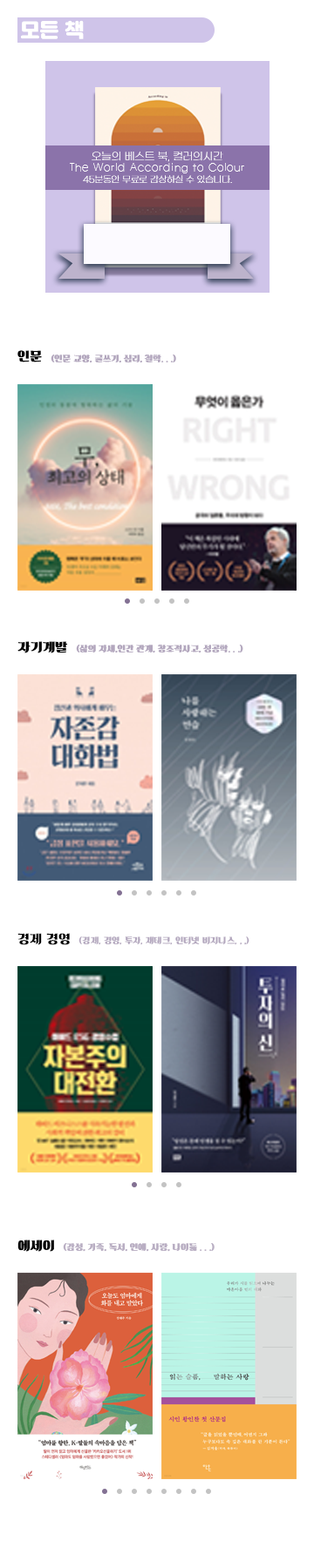
<style>
.page{position:relative;width:314px;height:1568px;background:#ffffff}
.page>*{position:absolute;margin:0}
.t1{font:19.3px "JalnanOTF";color:#ffffff}
.t2{font:10.5px "GmarketSansLight";color:#ffffff}
.t3{font:12.2px "HYnamL";color:#ffffff}
.t4{font:8.7px "GmarketSansLight";color:#ffffff}
.t5{font:13.1px "HULifestyle180";color:#000000}
.t6{font:8.7px "HULifestyle180";color:#b3a7be}
.t7{font:8.7px "HULifestyle180";color:#b9aec3}
</style>
<div class="page">
<p class="t1" style="left:21px;top:20px;width:63px;height:19px">모든 책</p>
<p class="t2" style="left:91px;top:152px;width:132px;height:10px">오늘의 베스트 북, 컬러의시간</p>
<p class="t3" style="left:70px;top:163px;width:174px;height:10px">The World According to Colour</p>
<p class="t4" style="left:83px;top:175px;width:149px;height:9px">45분동안 무료로 감상하실 수 있습니다.</p>
<p class="t5" style="left:17px;top:350px;width:25px;height:12px">인문</p>
<p class="t6" style="left:51px;top:355px;width:125px;height:8px">(인문 교양, 글쓰기, 심리, 철학. . .)</p>
<p class="t5" style="left:17px;top:641px;width:51px;height:12px">자기계발</p>
<p class="t6" style="left:76px;top:645px;width:167px;height:8px">(삶의 자세,인간 관계, 창조적사고, 성공학. . .)</p>
<p class="t5" style="left:17px;top:933px;width:53px;height:12px">경제 경영</p>
<p class="t6" style="left:78px;top:936px;width:171px;height:9px">(경제, 경영, 투자, 재테크, 인터넷 비지니스, , ,)</p>
<p class="t5" style="left:17px;top:1240px;width:37px;height:12px">에세이</p>
<p class="t7" style="left:63px;top:1243px;width:151px;height:9px">(감성, 가족, 독서, 연애, 사랑, 나이듦 . . .)</p>
</div>
